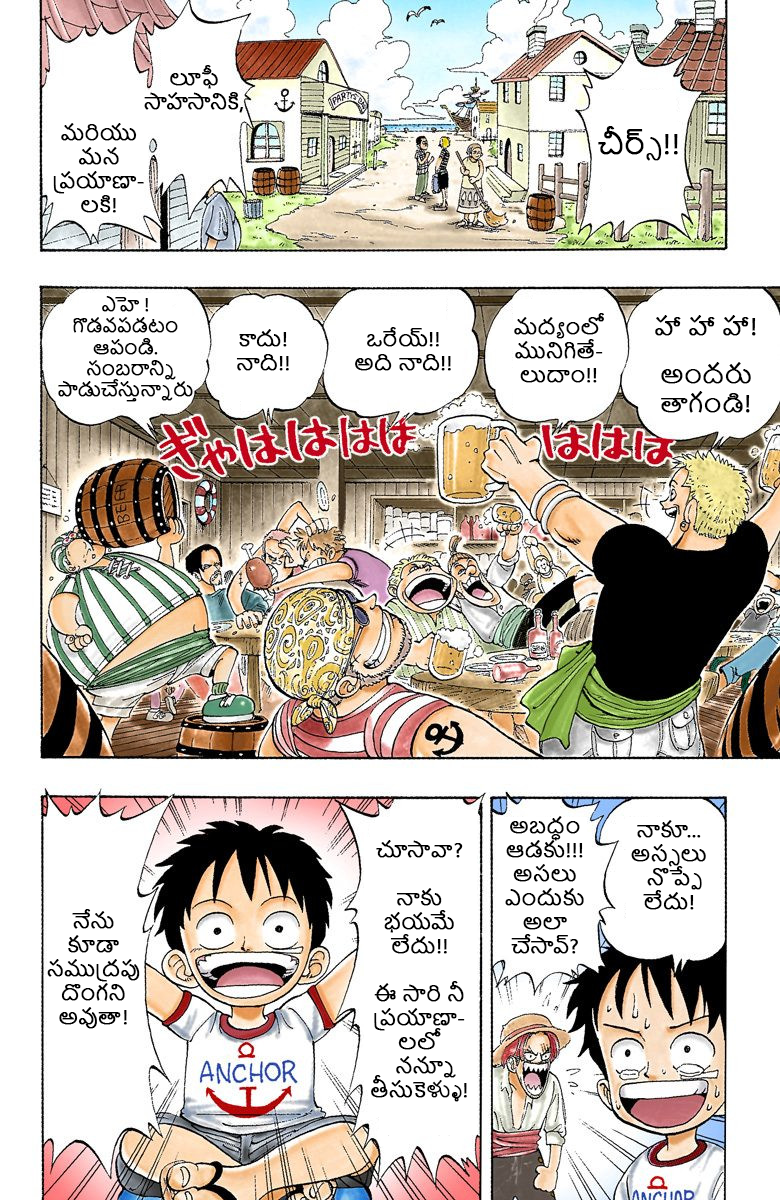
<style>
.page{position:relative;width:780px;height:1200px;background:#ffffff}
.page>*{position:absolute;margin:0}
.t1{font:20px "NirmalaUI";color:#000000;font-weight:bold}
.t2{font:28px "NirmalaUI";color:#000000;font-weight:bold}
.t3{font:17.7px "NirmalaUI";color:#000000;font-weight:bold}
.t4{font:24px "NirmalaUI";color:#000000;font-weight:bold}
</style>
<div class="page">
<p class="t1" style="left:144px;top:65px;width:99px;height:48px;text-align:center">లూఫీ <br>సాహసానికి,</p>
<p class="t1" style="left:53px;top:123px;width:91px;height:90px;text-align:center">మరియు మన ప్రయాణా-<br>లకి!</p>
<p class="t2" style="left:598px;top:126px;width:80px;height:35px">చీర్స్!!</p>
<p class="t3" style="left:58px;top:296px;width:135px;height:106px;text-align:center">ఎహె ! గొడవపడటం  ఆపండి.<br>సంబరాన్ని పాడుచేస్తున్నారు</p>
<p class="t1" style="left:514px;top:313px;width:90px;height:70px;text-align:center">మద్యంలో మునిగితే-లుదాం!!</p>
<p class="t4" style="left:655px;top:315px;width:101px;height:98px;text-align:center">హా హా హా!<br>  <br>అందరు తాగండి!</p>
<p class="t1" style="left:236px;top:329px;width:53px;height:42px;text-align:center">కాదు!<br>నాది!!</p>
<p class="t1" style="left:355px;top:327px;width:96px;height:44px;text-align:center">ఒరేయ్!! <br>అది నాది!!</p>
<p class="t1" style="left:505px;top:816px;width:79px;height:138px;text-align:center">అబద్ధం ఆడకు!!! అసలు ఎందుకు అలా చేసావ్?</p>
<p class="t1" style="left:631px;top:820px;width:75px;height:90px;text-align:center">నాకూ... అస్సలు నొప్పే లేదు!</p>
<p class="t1" style="left:371px;top:840px;width:96px;height:262px;text-align:center">చూసావా?<br><br>నాకు భయమే లేదు!!<br><br>ఈ సారి నీ ప్రయాణా-<br>లలో <br>నన్నూ తీసుకెళ్ళు!</p>
<p class="t1" style="left:47px;top:909px;width:93px;height:120px;text-align:center">నేను కూడా సముద్రపు దొంగని అవుతా!</p>
</div>
